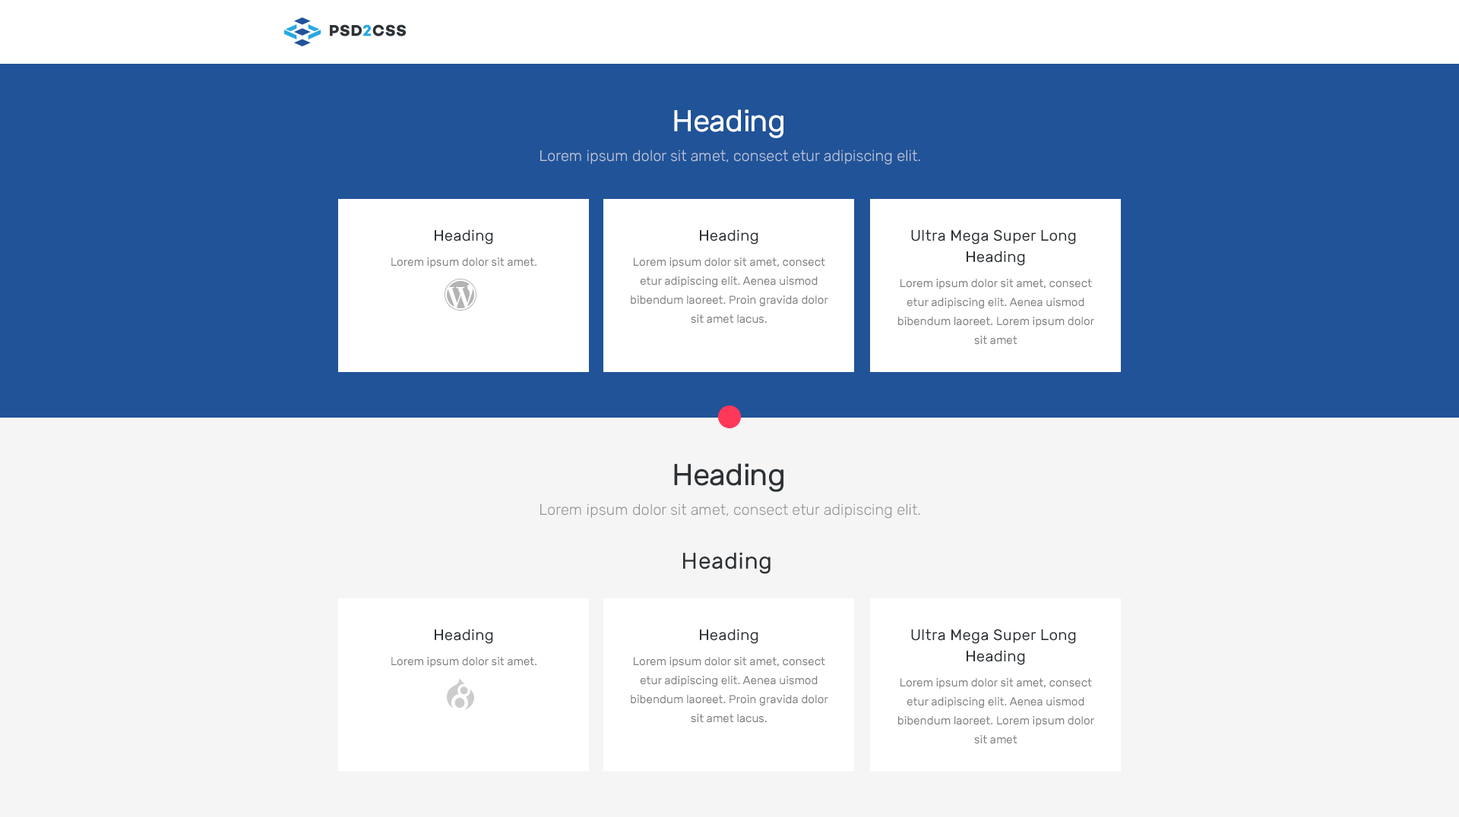
<style>
.page{position:relative;width:1459px;height:817px;background:#f5f5f5}
.page>*{position:absolute;margin:0}
.t1{font:30.4px "Rubik-Regular";letter-spacing:-0.02em;color:#ffffff}
.t2{font:15.2px "Rubik-Light";color:#bcc6d9}
.t3{font:15.2px "Rubik-Regular";letter-spacing:0.02em;color:#2d3236}
.t4{font:15.2px/21.3px "Rubik-Regular";letter-spacing:0.02em;color:#2d3236}
.t5{font:11.4px "Rubik-Regular";color:#808080}
.t6{font:11.4px/19px "Rubik-Regular";color:#808080}
.t7{font:30.4px "Rubik-Regular";letter-spacing:-0.02em;color:#2d3236}
.t8{font:15.2px "Rubik-Light";color:#929495}
.t9{font:22.8px "Rubik-Regular";letter-spacing:0.02em;color:#2d3236}
</style>
<div class="page">
<p class="t1" style="left:674px;top:109px;width:109px;height:29px">Heading</p>
<p class="t2" style="left:540px;top:150px;width:380px;height:15px">Lorem ipsum dolor sit amet, consect etur adipiscing elit.</p>
<p class="t3" style="left:435px;top:229px;width:58px;height:16px">Heading</p>
<p class="t3" style="left:700px;top:229px;width:58px;height:16px">Heading</p>
<p class="t4" style="left:911px;top:229px;width:165px;height:37px;text-align:center">Ultra Mega Super Long <br>Heading</p>
<p class="t5" style="left:391px;top:258px;width:145px;height:10px">Lorem ipsum dolor sit amet.</p>
<p class="t6" style="left:631px;top:258px;width:197px;height:66px;text-align:center">Lorem ipsum dolor sit amet, consect<br>etur adipiscing elit. Aenea uismod bibendum laoreet. Proin gravida dolor sit amet lacus.</p>
<p class="t6" style="left:898px;top:279px;width:196px;height:66px;text-align:center">Lorem ipsum dolor sit amet, consect<br>etur adipiscing elit. Aenea uismod bibendum laoreet. Lorem ipsum dolor sit amet</p>
<p class="t7" style="left:674px;top:463px;width:109px;height:29px">Heading</p>
<p class="t8" style="left:540px;top:504px;width:380px;height:15px">Lorem ipsum dolor sit amet, consect etur adipiscing elit.</p>
<p class="t9" style="left:683px;top:552px;width:87px;height:22px">Heading</p>
<p class="t3" style="left:435px;top:629px;width:58px;height:15px">Heading</p>
<p class="t3" style="left:700px;top:629px;width:58px;height:15px">Heading</p>
<p class="t4" style="left:911px;top:629px;width:165px;height:37px;text-align:center">Ultra Mega Super Long <br>Heading</p>
<p class="t5" style="left:391px;top:657px;width:145px;height:11px">Lorem ipsum dolor sit amet.</p>
<p class="t6" style="left:631px;top:657px;width:197px;height:66px;text-align:center">Lorem ipsum dolor sit amet, consect<br>etur adipiscing elit. Aenea uismod bibendum laoreet. Proin gravida dolor sit amet lacus.</p>
<p class="t6" style="left:898px;top:678px;width:196px;height:67px;text-align:center">Lorem ipsum dolor sit amet, consect<br>etur adipiscing elit. Aenea uismod bibendum laoreet. Lorem ipsum dolor sit amet</p>
</div>
